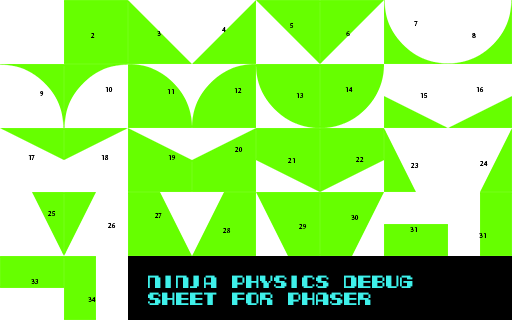
<style>
.page{position:relative;width:512px;height:320px;background:#ffffff}
.page>*{position:absolute;margin:0}
.t1{font:8px "LinBiolinumO";color:#000000}
.t2{font:8px "LinBiolinumO"}
</style>
<div class="page">
<p class="t1" style="left:222px;top:27px;width:4px;height:5px">4</p>
<p class="t1" style="left:290px;top:23px;width:4px;height:5px">5</p>
<p class="t1" style="left:414px;top:21px;width:4px;height:5px">7</p>
<p class="t1" style="left:91px;top:33px;width:4px;height:5px">2</p>
<p class="t1" style="left:157px;top:31px;width:4px;height:5px">3</p>
<p class="t2" style="left:346px;top:31px;width:4px;height:5px">6</p>
<p class="t1" style="left:472px;top:33px;width:4px;height:5px">8</p>
<p class="t1" style="left:105px;top:87px;width:8px;height:5px">10</p>
<p class="t1" style="left:167px;top:89px;width:7px;height:5px">11</p>
<p class="t1" style="left:234px;top:88px;width:8px;height:5px">12</p>
<p class="t1" style="left:345px;top:87px;width:8px;height:5px">14</p>
<p class="t1" style="left:476px;top:87px;width:8px;height:5px">16</p>
<p class="t1" style="left:40px;top:91px;width:4px;height:5px">9</p>
<p class="t1" style="left:296px;top:93px;width:8px;height:5px">13</p>
<p class="t1" style="left:420px;top:93px;width:8px;height:5px">15</p>
<p class="t1" style="left:235px;top:147px;width:8px;height:5px">20</p>
<p class="t1" style="left:28px;top:155px;width:7px;height:5px">17</p>
<p class="t1" style="left:101px;top:155px;width:8px;height:5px">18</p>
<p class="t1" style="left:168px;top:155px;width:8px;height:5px">19</p>
<p class="t1" style="left:288px;top:158px;width:7px;height:5px">21</p>
<p class="t1" style="left:356px;top:157px;width:8px;height:5px">22</p>
<p class="t1" style="left:480px;top:161px;width:8px;height:5px">24</p>
<p class="t1" style="left:411px;top:163px;width:8px;height:5px">23</p>
<p class="t1" style="left:48px;top:211px;width:8px;height:5px">25</p>
<p class="t1" style="left:155px;top:213px;width:7px;height:5px">27</p>
<p class="t1" style="left:351px;top:215px;width:8px;height:5px">30</p>
<p class="t1" style="left:108px;top:223px;width:8px;height:5px">26</p>
<p class="t1" style="left:223px;top:228px;width:8px;height:5px">28</p>
<p class="t1" style="left:299px;top:224px;width:8px;height:5px">29</p>
<p class="t1" style="left:410px;top:227px;width:7px;height:5px">31</p>
<p class="t1" style="left:479px;top:233px;width:7px;height:5px">31</p>
<p class="t1" style="left:31px;top:279px;width:8px;height:5px">33</p>
<p class="t1" style="left:88px;top:297px;width:8px;height:5px">34</p>
</div>
